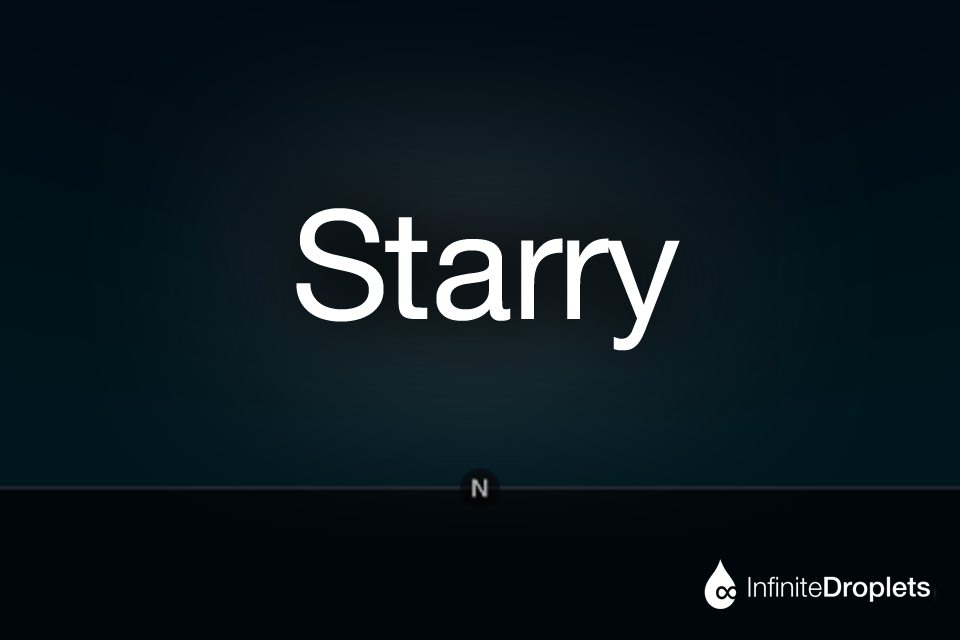
<style>
.page{position:relative;width:960px;height:640px}
.page>*{position:absolute;margin:0}
.t1{font:151.4px "HelveticaNeue";color:#ffffff}
</style>
<div class="page">
<p class="t1" style="left:296px;top:208px;width:384px;height:143px">Starry</p>
</div>
